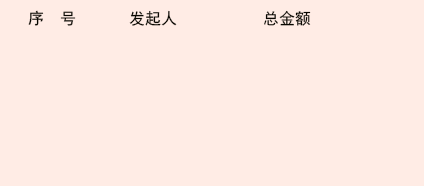
<style>
.page{position:relative;width:424px;height:186px;background:#ffece5}
.page>*{position:absolute;margin:0}
.t1{font:16px "SimHei";color:#080600}
</style>
<div class="page">
<p class="t1" style="left:28px;top:10px;width:48px;height:16px">序  号</p>
<p class="t1" style="left:129px;top:10px;width:48px;height:16px">发起人</p>
<p class="t1" style="left:264px;top:10px;width:47px;height:16px">总金额</p>
</div>
